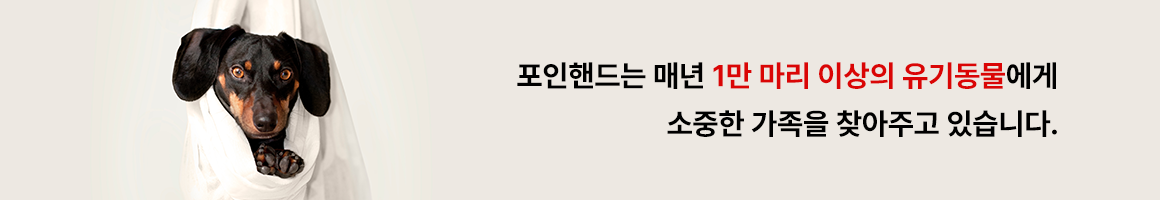
<style>
.page{position:relative;width:1160px;height:200px;background:#ede8e2}
.page>*{position:absolute;margin:0}
.t1{font:30px/48px "Pretendard-Bold";color:#000000}
.t2{font:30px/48px "Pretendard-Bold";color:#da0505}
</style>
<div class="page">
<p class="t1" style="left:517px;top:62px;width:540px;height:75px;text-align:right">포인핸드는 매년 <span class="t2">1만 마리 이상의 유기동물</span>에게<br>소중한 가족을 찾아주고 있습니다.</p>
</div>
